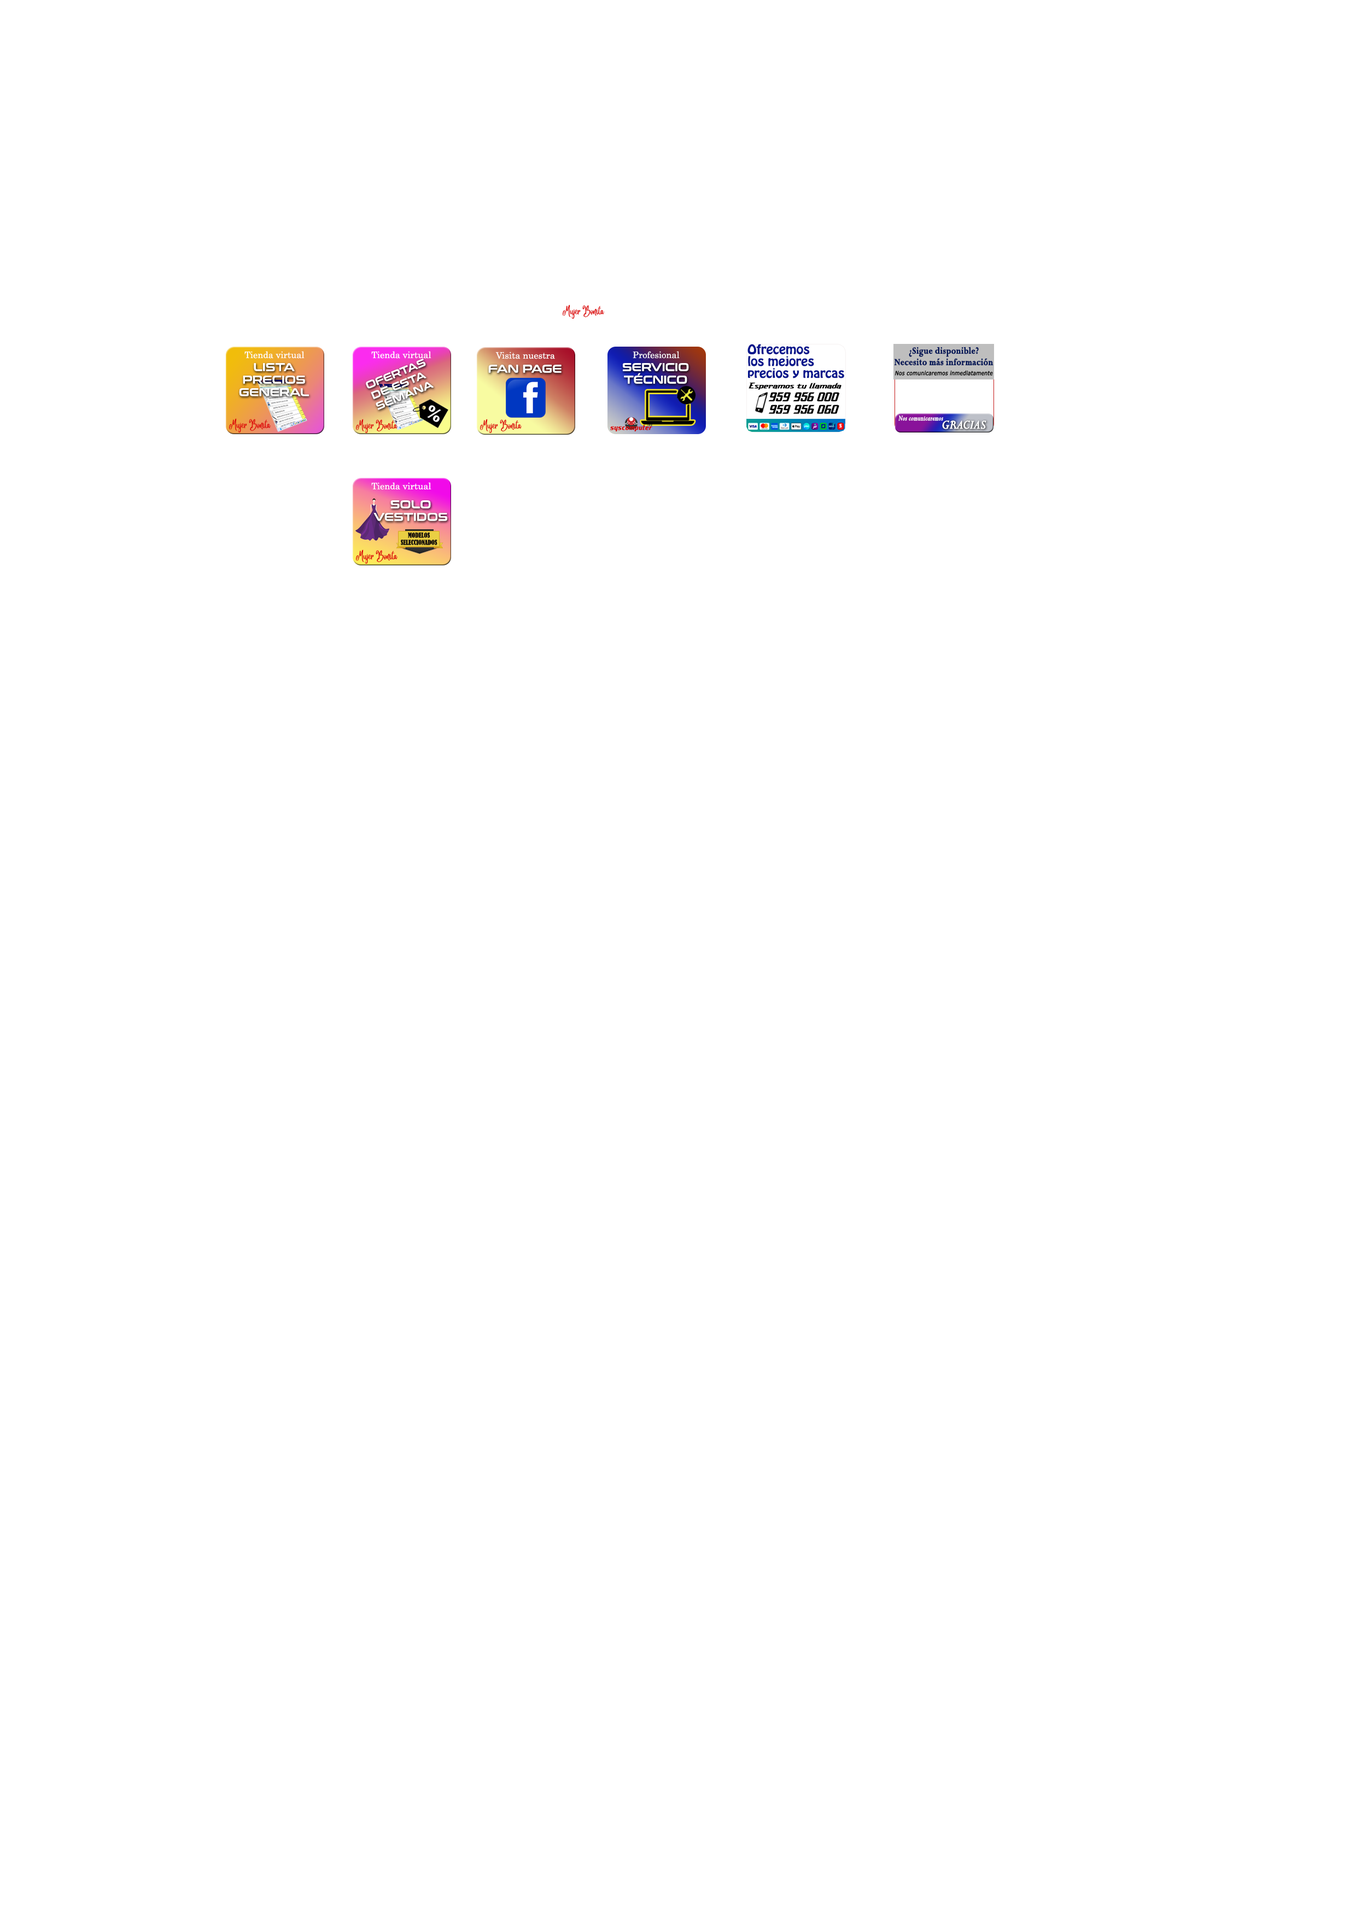
<style>
.page{position:relative;width:1356px;height:1918px;background:#ffffff}
.page>*{position:absolute;margin:0}
.t1{font:7.8px/8.7px "Angelina";color:#dd0a0a}
.t2{font:9px "Century";color:#ffffff}
.t3{font:11.5px/11.9px "HoboStd";color:#06168c;scale:1.1 1}
.t4{font:10px/11.4px "Perpetua-Bold";color:#051958;font-weight:bold;scale:0.85 1}
.t5{font:5.9px/10.3px "Verdana-Italic";color:#000000;font-weight:bold;scale:0.85 1}
.t6{font:11.3px/12.5px "ConthraxSb-Regular";color:#ffffff}
.t7{font:10.4px/11.6px "ConthraxSb-Regular";color:#ffffff}
.t8{font:11.3px "ConthraxSb-Regular";color:#ffffff}
.t9{font:8.1px "DashHorizon";color:#000000;scale:1.49 1}
.t10{font:11.9px/12.5px "DashHorizon";color:#000000;scale:1.17 1}
.t11{font:8.1px "Perpetua-Italic";color:#fffffe;font-weight:bold;scale:0.83 1}
.t12{font:13.5px "Perpetua-Italic";color:#ffffff;font-weight:bold}
</style>
<div class="page">
<p class="t1" style="left:563px;top:305px;width:41px;height:14px;text-align:center">Mujer Bonita</p>
<p class="t2" style="left:244px;top:351px;width:61px;height:8px">Tienda virtual</p>
<p class="t2" style="left:371px;top:351px;width:60px;height:8px">Tienda virtual</p>
<p class="t2" style="left:495px;top:352px;width:60px;height:7px">Visita nuestra</p>
<p class="t2" style="left:633px;top:351px;width:47px;height:8px">Profesional</p>
<p class="t3" style="left:747px;top:344px;width:97px;height:34px">Ofrecemos<br>los mejores<br>precios y marcas</p>
<p class="t4" style="left:894px;top:347px;width:100px;height:29px;text-align:center">¿Sigue disponible?<br>Necesito más información<br><span class="t5">Nos comunicaremos inmediatamente</span></p>
<p class="t6" style="left:239px;top:363px;width:70px;height:33px;text-align:center">LISTA<br>PRECIOS<br>GENERAL</p>
<p class="t7" style="left:366px;top:359px;width:68px;height:51px;text-align:center;rotate:-22deg">OFERTAS<br>DE ESTA <br>SEMANA</p>
<p class="t8" style="left:488px;top:365px;width:74px;height:8px">FAN PAGE</p>
<p class="t6" style="left:623px;top:363px;width:66px;height:21px;text-align:center">SERVICIO<br>TÉCNICO</p>
<p class="t9" style="left:749px;top:382px;width:93px;height:8px">Esperamos tu llamada</p>
<p class="t10" style="left:768px;top:392px;width:72px;height:22px">959 956 000<br>959 956 060</p>
<p class="t1" style="left:229px;top:418px;width:42px;height:15px;text-align:center">Mujer Bonita</p>
<p class="t1" style="left:356px;top:419px;width:42px;height:14px;text-align:center">Mujer Bonita</p>
<p class="t1" style="left:480px;top:419px;width:42px;height:14px;text-align:center">Mujer Bonita</p>
<p class="t11" style="left:898px;top:416px;width:45px;height:5px">Nos comunicaremos</p>
<p class="t12" style="left:942px;top:421px;width:44px;height:8px">GRACIAS</p>
<p class="t2" style="left:371px;top:482px;width:60px;height:8px">Tienda virtual</p>
<p class="t6" style="left:373px;top:500px;width:74px;height:21px;text-align:center">SOLO<br>VESTIDOS</p>
<p class="t1" style="left:356px;top:550px;width:42px;height:14px;text-align:center">Mujer Bonita</p>
</div>
